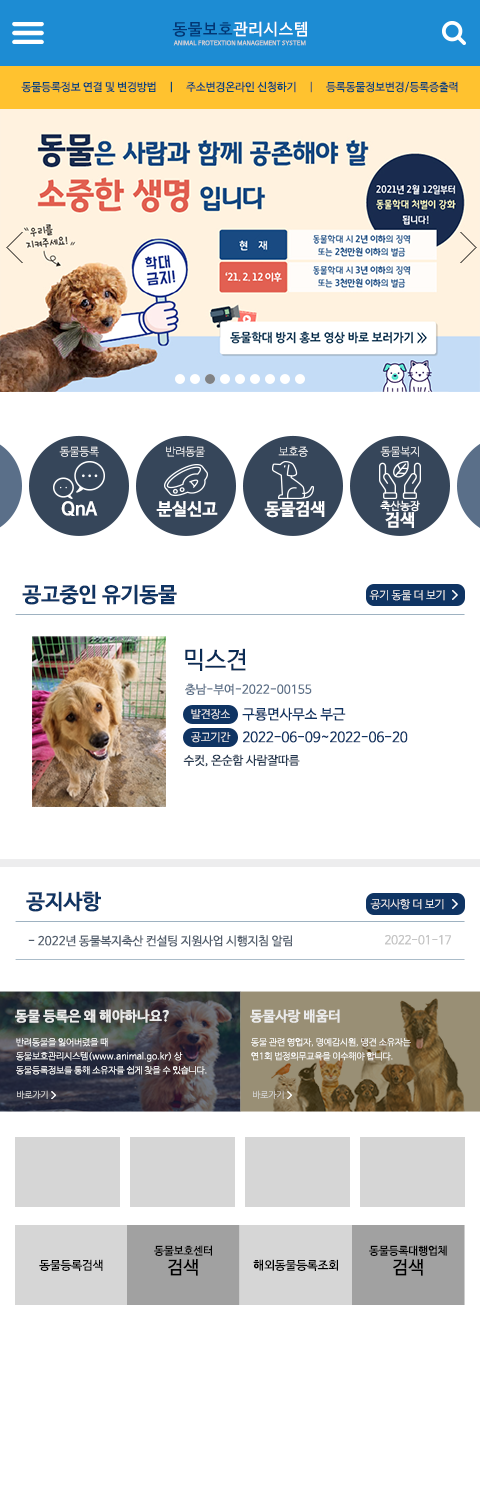
<style>
.page{position:relative;width:480px;height:1500px;background:#ffffff}
.page>*{position:absolute;margin:0}
.t1{font:16px "NanumBarunGothicOTF";letter-spacing:0.055em;color:#ffffff}
.t2{font:16px "NanumBarunGothicOTF";letter-spacing:0.055em;color:#033674}
.t3{font:6px "NanumBarunGothicOTF";letter-spacing:0.02em;color:#d4d4d4}
.t4{font:11px "NanumBarunGothicOTF";color:#094576}
.t5{font:11px "NanumBarunGothicOTFUltraLight";color:#ffffff}
.t6{font:11px "NanumBarunGothicOTFUltraLight"}
.t7{font:18px "NanumBarunGothicOTFBold";color:#ffffff}
.t8{font:17px "NanumBarunGothicOTFBold";color:#ffffff}
.t9{font:11px/16px "NanumBarunGothicOTF";color:#ffffff}
.t10{font:17px/16px "NanumBarunGothicOTFBold";color:#ffffff}
.t11{font:21px "NanumBarunGothicOTFBold";color:#0f3463}
.t12{font:11px "NanumBarunGothicOTFLight";color:#ededee}
.t13{font:24px "NanumBarunGothicOTF";color:#092b55}
.t14{font:12px "NanumBarunGothicOTF";color:#5d7189}
.t15{font:14px "NanumBarunGothicOTF";color:#0f3463}
.t16{font:14px "NanumBarunGothicOTF";letter-spacing:-0.025em;color:#0f3463}
.t17{font:12px "NanumBarunGothicOTF";color:#243850}
.t18{font:12px "NanumBarunGothicOTF";color:#515d6c}
.t19{font:12px "NanumBarunGothicOTF";letter-spacing:-0.025em;color:#c5c5c5}
.t20{font:12px "NanumBarunGothicOTF";color:#c5c5c5}
.t21{font:14px "NanumBarunGothicOTFBold";color:#eaeaea}
.t22{font:9px/14px "NanumBarunGothicOTFLight";color:#ffffff}
.t23{font:9px "NanumBarunGothicOTFLight";color:#d6d6d6}
.t24{font:11px "NanumBarunGothicOTF";color:#000000}
.t25{font:12px "NanumBarunGothicOTF";color:#000000}
.t26{font:18px "NanumBarunGothicOTF";color:#000000}
</style>
<div class="page">
<p class="t1" style="left:172px;top:21px;width:135px;height:16px"><span class="t2">동물보호</span>관리시스템</p>
<p class="t3" style="left:173px;top:40px;width:133px;height:6px">ANIMAL FROTEXTION MANAGEMENT SYSTEM</p>
<p class="t4" style="left:21px;top:81px;width:437px;height:12px">동물등록정보 연결 및 변경방법     |     주소변경온라인 신청하기     |     등록동물정보변경/등록증출력</p>
<p class="t5" style="left:59px;top:446px;width:40px;height:11px">동물등록</p>
<p class="t5" style="left:166px;top:446px;width:39px;height:11px">반려동물</p>
<p class="t6" style="left:278px;top:446px;width:30px;height:11px">보호중</p>
<p class="t6" style="left:380px;top:446px;width:39px;height:11px">동물복지</p>
<p class="t7" style="left:61px;top:501px;width:37px;height:15px">QnA</p>
<p class="t8" style="left:156px;top:501px;width:62px;height:16px">분실신고</p>
<p class="t8" style="left:264px;top:501px;width:61px;height:17px">동물검색</p>
<p class="t9" style="left:380px;top:500px;width:40px;height:28px;text-align:center">축산농장<br><span class="t10">검색</span></p>
<p class="t11" style="left:22px;top:584px;width:155px;height:21px">공고중인 유기동물</p>
<p class="t12" style="left:369px;top:590px;width:76px;height:11px">유기 동물 더 보기</p>
<p class="t13" style="left:185px;top:648px;width:61px;height:23px">믹스견</p>
<p class="t14" style="left:185px;top:683px;width:127px;height:12px">충남-부여-2022-00155</p>
<p class="t12" style="left:191px;top:709px;width:39px;height:11px">발견장소</p>
<p class="t15" style="left:242px;top:707px;width:104px;height:14px">구룡면사무소 부근</p>
<p class="t12" style="left:191px;top:732px;width:40px;height:11px">공고기간</p>
<p class="t16" style="left:243px;top:731px;width:165px;height:12px">2022-06-09~2022-06-20</p>
<p class="t17" style="left:183px;top:754px;width:117px;height:13px">수컷, 온순함 사람잘따름</p>
<p class="t11" style="left:26px;top:891px;width:75px;height:21px">공지사항</p>
<p class="t12" style="left:370px;top:899px;width:74px;height:11px">공지사항 더 보기</p>
<p class="t18" style="left:28px;top:935px;width:264px;height:12px">- 2022년 동물복지축산 컨설팅 지원사업 시행지침 알림</p>
<p class="t19" style="left:385px;top:935px;width:66px;height:10px"><span class="t20"> </span>2022-01-17</p>
<p class="t21" style="left:15px;top:1009px;width:154px;height:14px">동물 등록은 왜 해야하나요?</p>
<p class="t21" style="left:250px;top:1009px;width:90px;height:14px">동물사랑 배움터</p>
<p class="t22" style="left:16px;top:1038px;width:191px;height:37px">반려동물을 잃어버렸을 때 <br>동물보호관리시스템(www.animal.go.kr) 상 <br>동물등록정보를 통해 소유자를 쉽게 찾을 수 있습니다.</p>
<p class="t22" style="left:251px;top:1038px;width:160px;height:23px">동물 관련 영업자, 명예감시원, 맹견 소유자는<br>연1회 법정의무교육을 이수해야 합니다.</p>
<p class="t23" style="left:17px;top:1090px;width:31px;height:9px">바로가기</p>
<p class="t23" style="left:253px;top:1090px;width:31px;height:9px">바로가기</p>
<p class="t24" style="left:154px;top:1245px;width:58px;height:11px">동물보호센터</p>
<p class="t24" style="left:369px;top:1245px;width:78px;height:11px">동물등록대행업체</p>
<p class="t25" style="left:39px;top:1259px;width:64px;height:12px">동물등록검색</p>
<p class="t26" style="left:168px;top:1259px;width:30px;height:17px">검색</p>
<p class="t25" style="left:253px;top:1259px;width:85px;height:12px">해외동물등록조회</p>
<p class="t26" style="left:393px;top:1259px;width:30px;height:17px">검색</p>
</div>
